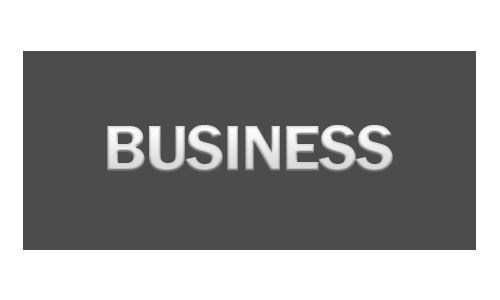
<style>
.page{position:relative;width:500px;height:300px;background:#4c4c4c}
.page>*{position:absolute;margin:0}
.t1{font:66.7px "FranklinGothic-Demi";letter-spacing:-0.025em}
</style>
<div class="page">
<p class="t1" style="left:107px;top:125px;width:286px;height:47px">BUSINESS</p>
</div>
